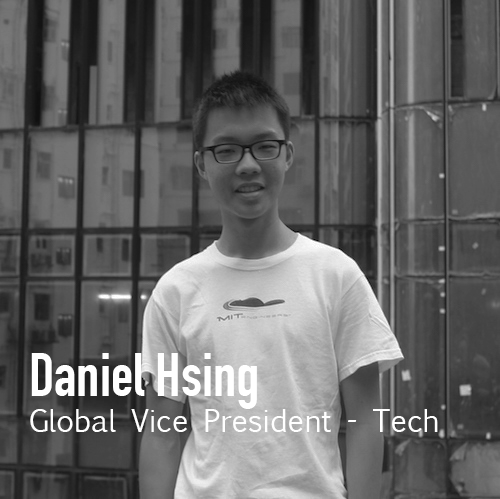
<style>
.page{position:relative;width:500px;height:499px}
.page>*{position:absolute;margin:0}
.t1{font:30px "EuphemiaUCAS";color:#ffffff}
.t2{font:60px "DINCondensed-Bold";color:#ffffff}
</style>
<div class="page">
<p class="t1" style="left:30px;top:353px;width:408px;height:79px"><span class="t2">Daniel Hsing<br></span>Global Vice President - Tech</p>
</div>
